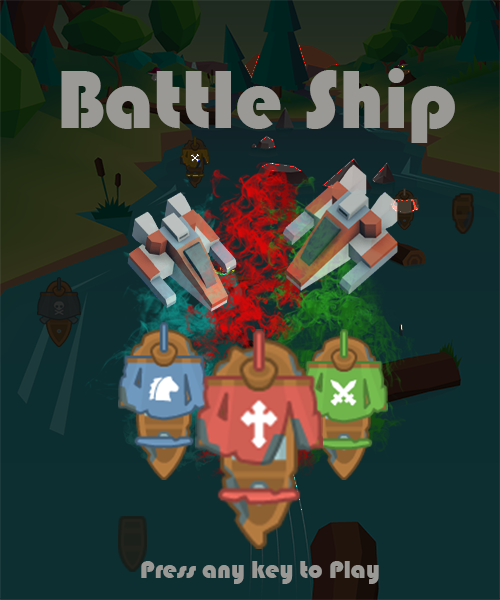
<style>
.page{position:relative;width:500px;height:600px}
.page>*{position:absolute;margin:0}
.t1{font:84.7px "Bauhaus93";color:#9a9995}
.t2{font:25.7px "Bauhaus93";color:#9a9995}
</style>
<div class="page">
<p class="t1" style="left:61px;top:68px;width:394px;height:75px">Battle Ship</p>
<p class="t2" style="left:141px;top:561px;width:238px;height:23px">Press any key to Play</p>
</div>
